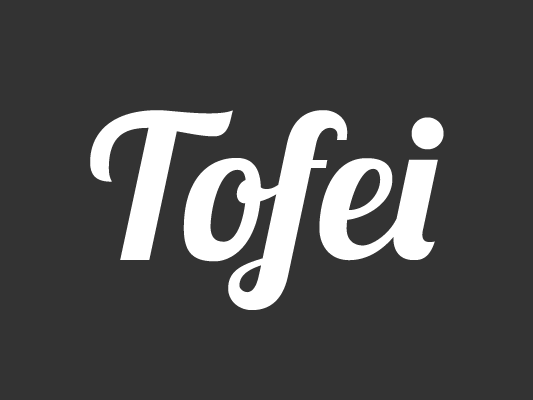
<style>
.page{position:relative;width:533px;height:400px;background:#333333}
.page>*{position:absolute;margin:0}
.t1{font:200px "Lobster1.3";color:#ffffff}
</style>
<div class="page">
<p class="t1" style="left:90px;top:110px;width:354px;height:200px">Tofei</p>
</div>
